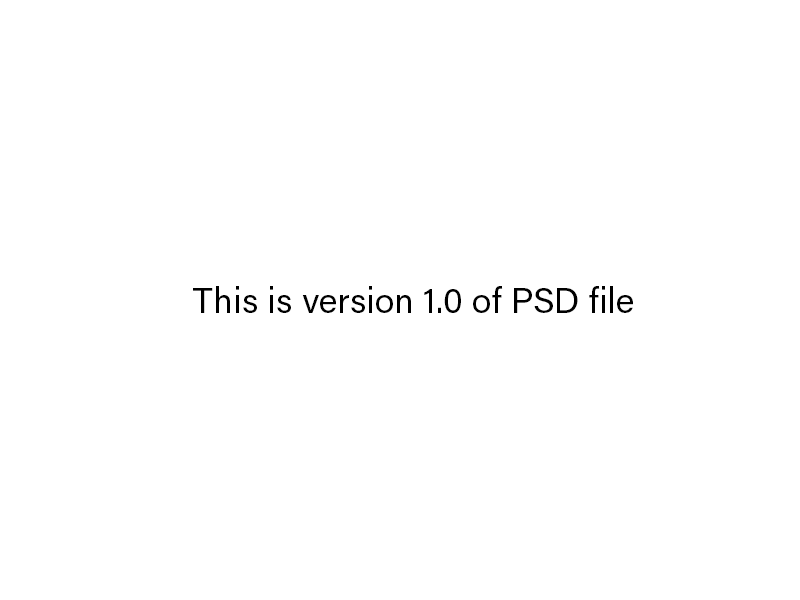
<style>
.page{position:relative;width:800px;height:600px;background:#ffffff}
.page>*{position:absolute;margin:0}
.t1{font:35.4px "AcuminPro-Regular";color:#000000}
</style>
<div class="page">
<p class="t1" style="left:193px;top:286px;width:440px;height:27px">This is version 1.0 of PSD file</p>
</div>
